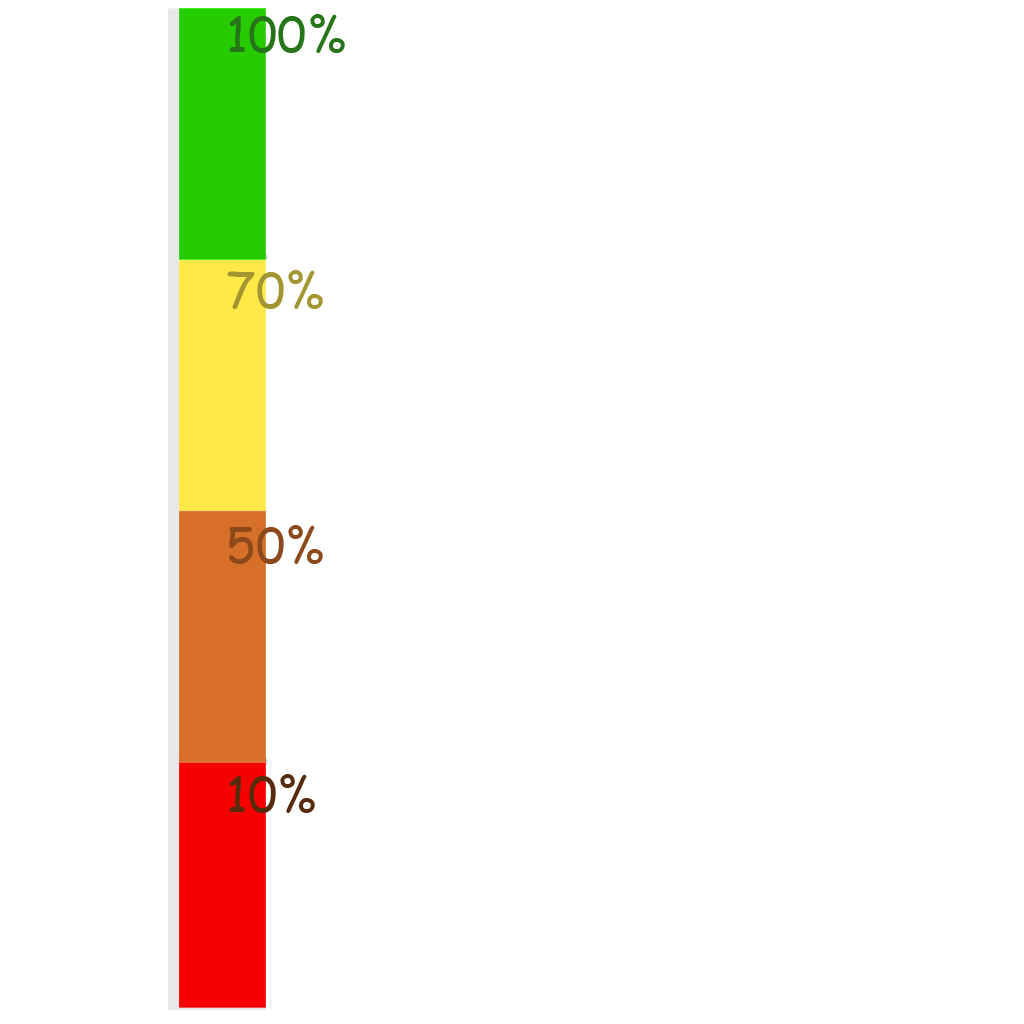
<style>
.page{position:relative;width:1024px;height:1024px;background:#ffffff}
.page>*{position:absolute;margin:0}
.t1{font:48px "ComicSansMS";color:#267619}
.t2{font:48px "ComicSansMS";color:#a3952f}
.t3{font:48px "ComicSansMS";color:#8b491c}
.t4{font:48px "ComicSansMS";color:#572c0d}
</style>
<div class="page">
<p class="t1" style="left:229px;top:14px;width:116px;height:39px">100%</p>
<p class="t2" style="left:227px;top:270px;width:96px;height:39px">70%</p>
<p class="t3" style="left:229px;top:525px;width:94px;height:39px">50%</p>
<p class="t4" style="left:229px;top:774px;width:86px;height:39px">10%</p>
</div>
